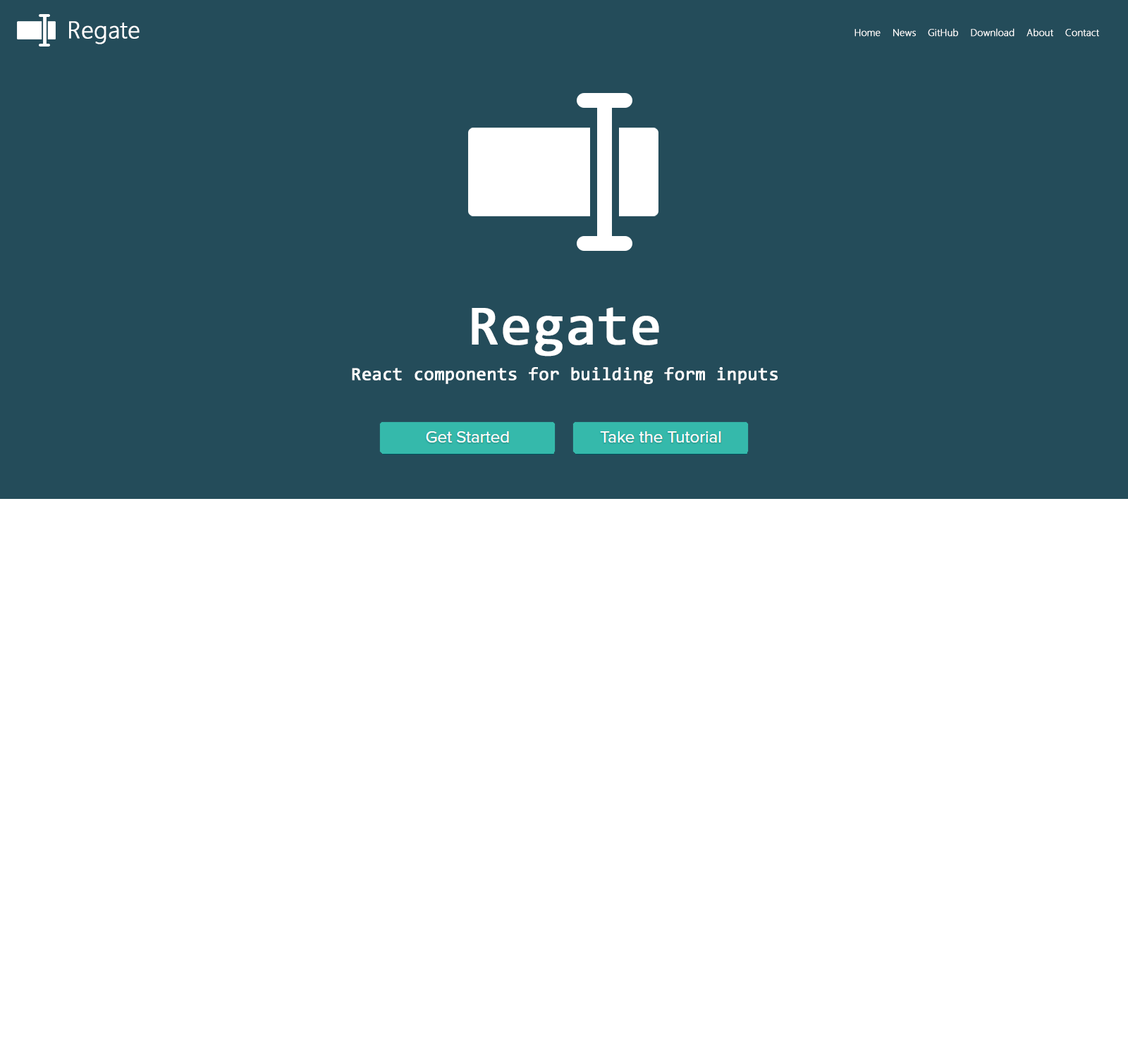
<style>
.page{position:relative;width:1128px;height:1057px;background:#ffffff}
.page>*{position:absolute;margin:0}
.t1{font:23.8px "SegoeUI-Light";color:#ffffff;font-weight:bold}
.t2{font:9.9px "SegoeUI-Light";color:#ffffff;font-weight:bold}
.t3{font:18.1px/36.2px "Consolas";color:#ffffff;font-weight:bold}
.t4{font:56.3px/30.2px "Consolas";color:#ffffff;font-weight:bold}
</style>
<div class="page">
<p class="t1" style="left:69px;top:21px;width:71px;height:23px">Regate</p>
<p class="t2" style="left:854px;top:28px;width:245px;height:9px">Home    News    GitHub    Download    About    Contact</p>
<p class="t3" style="left:352px;top:307px;width:425px;height:77px;text-align:center"><span class="t4">Regate<br></span>React components for building form inputs</p>
</div>
